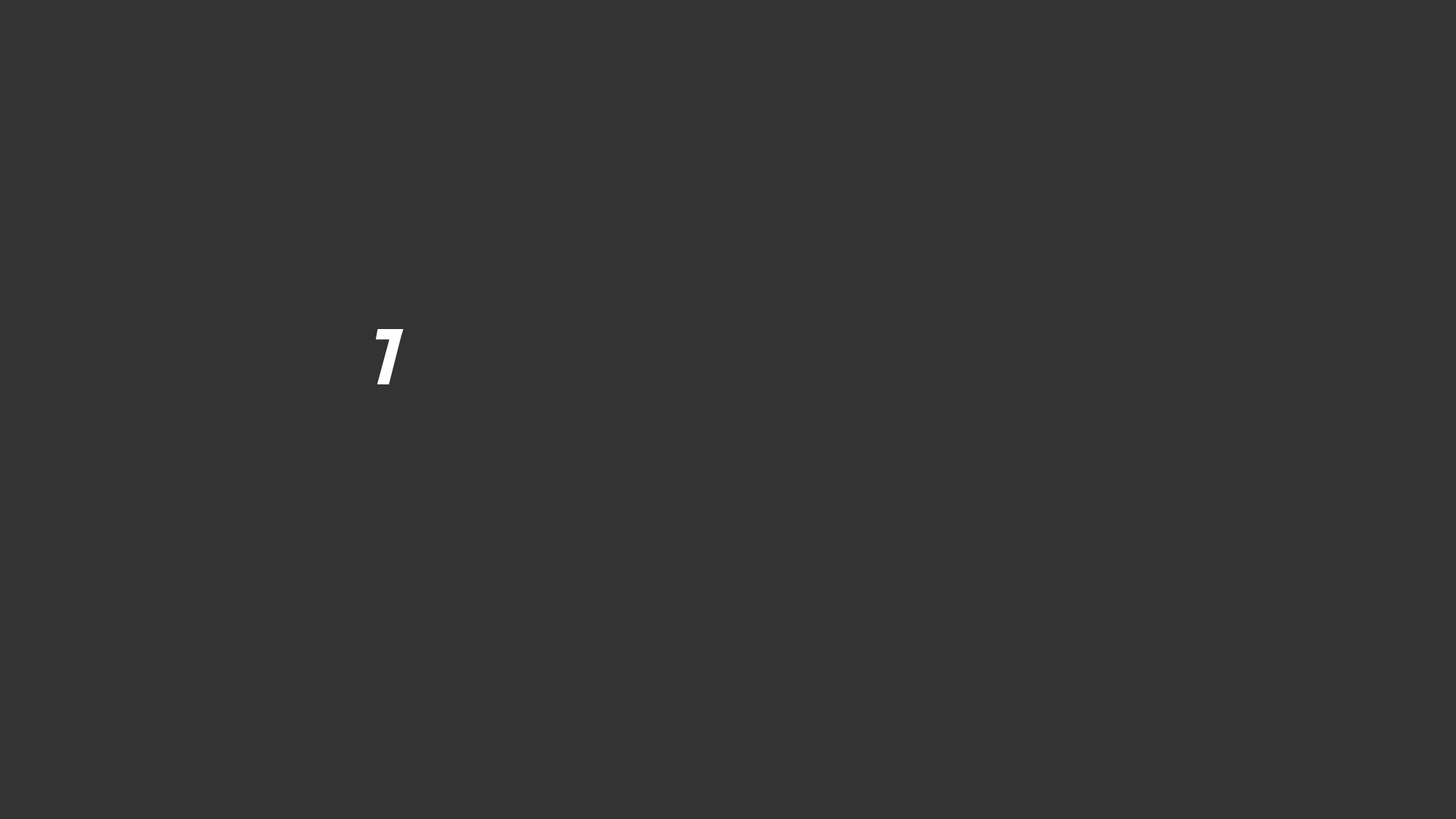
<style>
.page{position:relative;width:1456px;height:819px;background:#333333}
.page>*{position:absolute;margin:0}
.t1{font:75.9px "AmericanCaptain";color:#ffffff}
</style>
<div class="page">
<p class="t1" style="left:376px;top:329px;width:27px;height:55px">7</p>
</div>
